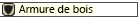
<style>
.page{position:relative;width:140px;height:19px;background:#ffffff}
.page>*{position:absolute;margin:0}
.t1{font:10.9px "LaoUI";color:#000000}
</style>
<div class="page">
<p class="t1" style="left:18px;top:5px;width:75px;height:8px">Armure de bois</p>
</div>
